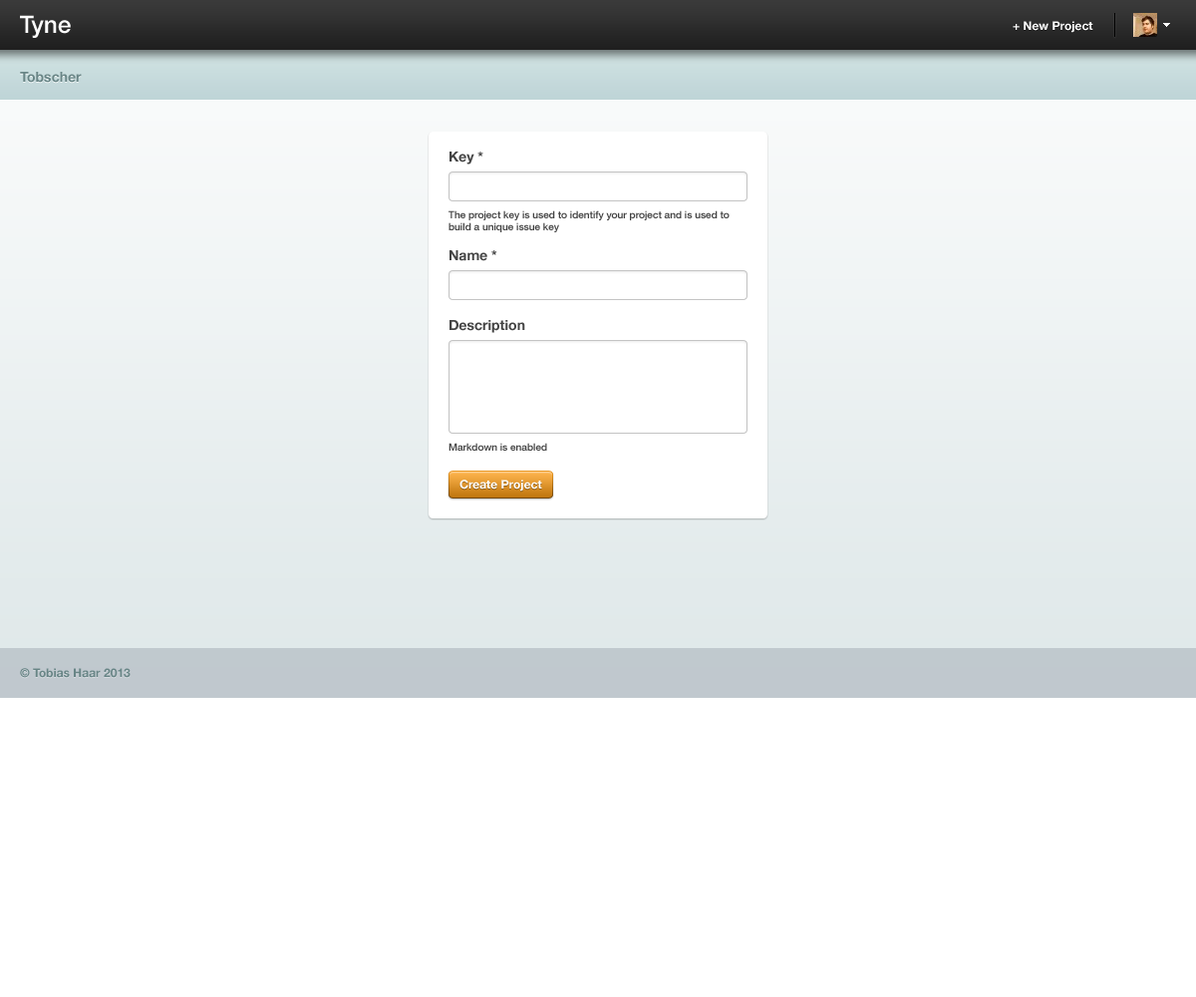
<style>
.page{position:relative;width:1196px;height:997px;background:#ffffff}
.page>*{position:absolute;margin:0}
.t1{font:23.9px "HelveticaNeue-Medium";color:#ffffff}
.t2{font:12px "HelveticaNeue-Bold";color:#ffffff}
.t3{font:14px "HelveticaNeue-Bold";color:#688586}
.t4{font:14px "HelveticaNeue-Bold";color:#444444}
.t5{font:10px "HelveticaNeue-Medium";color:#444444}
.t6{font:12px "HelveticaNeue-Bold";color:#688586}
</style>
<div class="page">
<p class="t1" style="left:20px;top:15px;width:51px;height:23px">Tyne</p>
<p class="t2" style="left:1013px;top:21px;width:81px;height:12px">+ New Project</p>
<p class="t3" style="left:20px;top:72px;width:62px;height:11px">Tobscher</p>
<p class="t4" style="left:450px;top:152px;width:33px;height:12px">Key *</p>
<p class="t5" style="left:449px;top:210px;width:281px;height:22px">The project key is used to identify your project and is used to build a unique issue key</p>
<p class="t4" style="left:450px;top:250px;width:47px;height:11px">Name *</p>
<p class="t4" style="left:450px;top:320px;width:75px;height:13px">Description</p>
<p class="t5" style="left:449px;top:443px;width:98px;height:8px">Markdown is enabled</p>
<p class="t2" style="left:460px;top:479px;width:82px;height:12px">Create Project</p>
<p class="t6" style="left:20px;top:668px;width:111px;height:10px">© Tobias Haar 2013</p>
</div>
